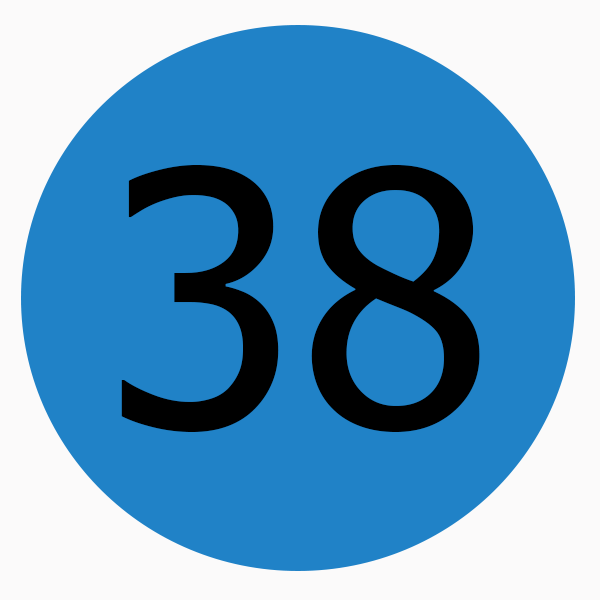
<style>
.page{position:relative;width:600px;height:600px;background:#2082c7}
.page>*{position:absolute;margin:0}
.t1{font:354.2px "Tahoma";color:#000000}
</style>
<div class="page">
<p class="t1" style="left:121px;top:165px;width:359px;height:267px">38</p>
</div>
